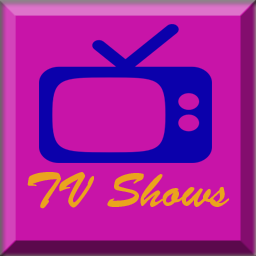
<style>
.page{position:relative;width:256px;height:256px;background:#c814a8}
.page>*{position:absolute;margin:0}
.t1{font:48px "BrushScriptStd";color:#eaa41d}
</style>
<div class="page">
<p class="t1" style="left:27px;top:172px;width:203px;height:37px">TV Shows</p>
</div>
